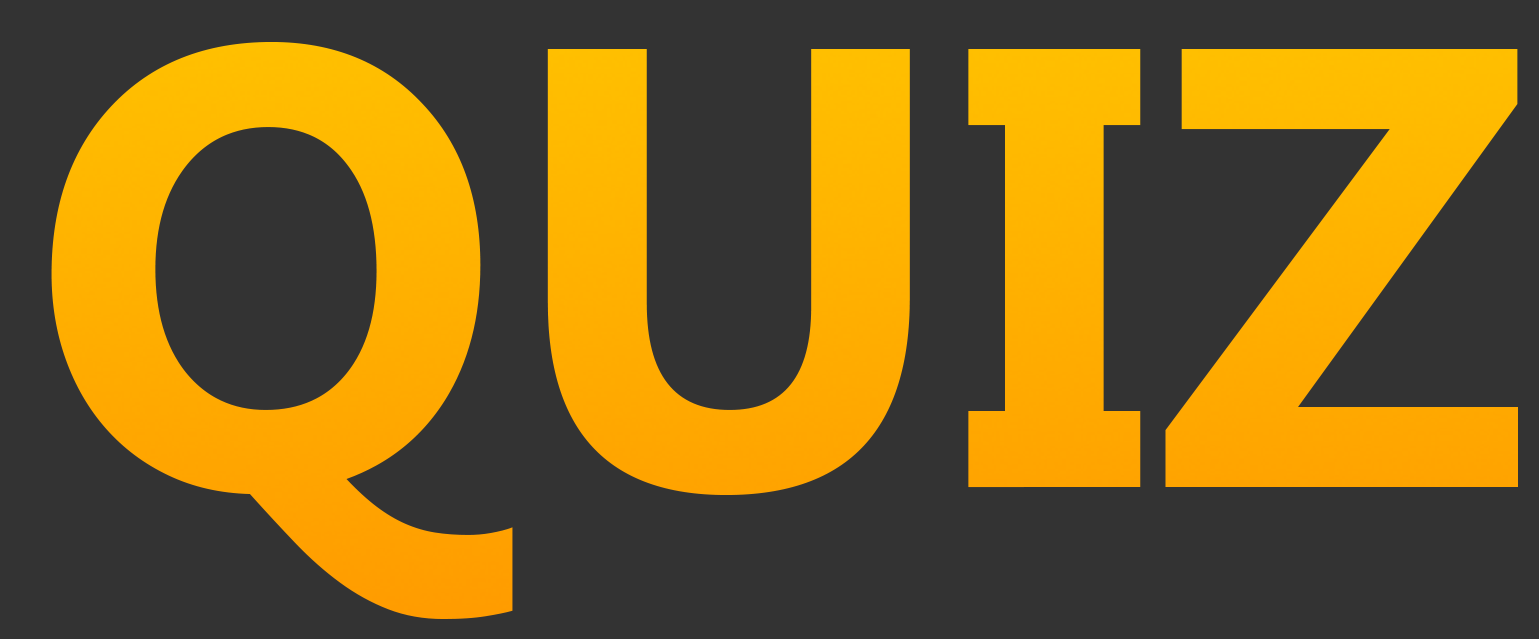
<style>
.page{position:relative;width:1539px;height:639px;background:#333333}
.page>*{position:absolute;margin:0}
.t1{font:625px "Ebrima-Bold";color:#ffb000;text-transform:uppercase}
</style>
<div class="page">
<p class="t1" style="left:51px;top:42px;width:1467px;height:577px">Quiz</p>
</div>
